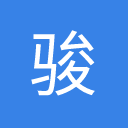
<style>
.page{position:relative;width:128px;height:128px;background:#3782e7}
.page>*{position:absolute;margin:0}
.t1{font:70.7px "SourceHanSansSC-Regular";color:#ffffff}
</style>
<div class="page">
<p class="t1" style="left:31px;top:30px;width:64px;height:66px">骏</p>
</div>
